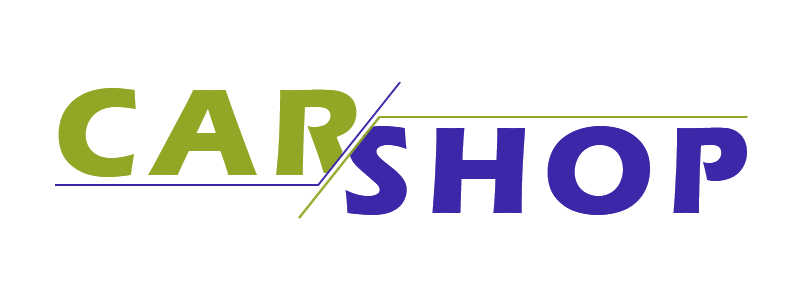
<style>
.page{position:relative;width:800px;height:300px;background:#ffffff}
.page>*{position:absolute;margin:0}
.t1{font:128px "ErasITC-Bold";letter-spacing:0.1em;color:#91a826}
.t2{font:128px "ErasITC-Bold";letter-spacing:0.1em;color:#3d26a8}
</style>
<div class="page">
<p class="t1" style="left:58px;top:88px;width:299px;height:89px">CAR</p>
<p class="t2" style="left:345px;top:126px;width:402px;height:89px">SHOP</p>
</div>
